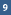
<style>
.page{position:relative;width:11px;height:15px;background:#365f8c}
.page>*{position:absolute;margin:0}
.t1{font:10px "MyriadPro-Regular";letter-spacing:-0.1em;color:#ffffff}
</style>
<div class="page">
<p class="t1" style="left:3px;top:4px;width:5px;height:7px">9</p>
</div>
